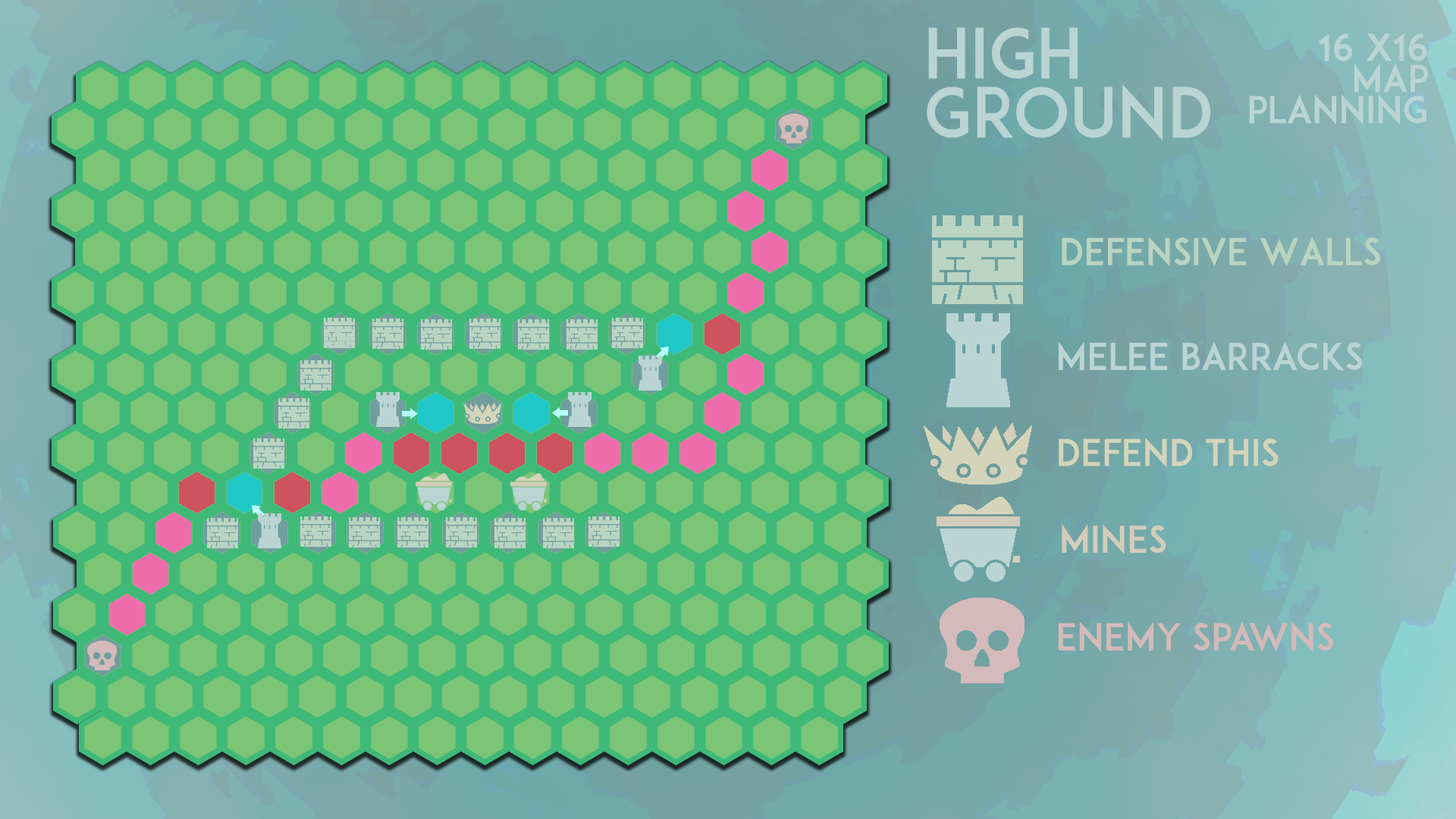
<style>
.page{position:relative;width:1456px;height:819px}
.page>*{position:absolute;margin:0}
.t1{font:68.2px "ADAM.CGPRO";color:#bad4d4}
.t2{font:36.4px/31.1px "ADAM.CGPRO";color:#bad4d4}
.t3{font:36.4px "ADAM.CGPRO";color:#bad4c1}
.t4{font:36.4px "ADAM.CGPRO";color:#bad4d4}
.t5{font:36.4px "ADAM.CGPRO";color:#d3d4ba}
.t6{font:36.4px "ADAM.CGPRO";color:#d4ccba}
.t7{font:36.4px "ADAM.CGPRO";color:#d4baba}
</style>
<div class="page">
<p class="t1" style="left:927px;top:27px;width:283px;height:113px">High Ground</p>
<p class="t2" style="left:1249px;top:33px;width:179px;height:91px;text-align:right">16 x16 <br>Map <br>Planning</p>
<p class="t3" style="left:1062px;top:237px;width:318px;height:30px">defensive Walls</p>
<p class="t4" style="left:1059px;top:341px;width:304px;height:29px">Melee Barracks</p>
<p class="t5" style="left:1059px;top:438px;width:220px;height:30px">Defend this</p>
<p class="t6" style="left:1062px;top:524px;width:104px;height:30px">Mines</p>
<p class="t7" style="left:1059px;top:622px;width:275px;height:30px">Enemy Spawns</p>
</div>
